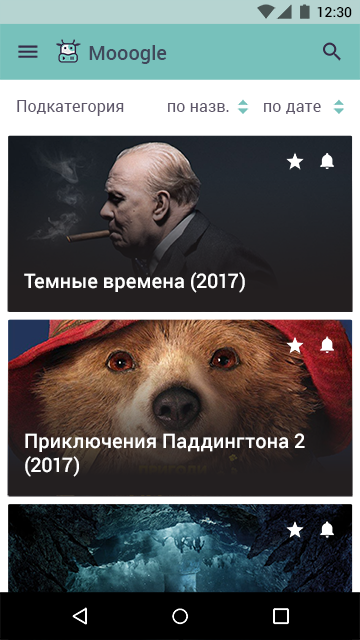
<style>
.page{position:relative;width:360px;height:640px}
.page>*{position:absolute;margin:0}
.t1{font:14px "Roboto-Medium";color:#000000}
.t2{font:20px "Roboto-Medium";letter-spacing:0.005em;color:#41485b}
.t3{font:16px "Roboto-Regular";letter-spacing:0.005em;color:#5e576a}
.t4{font:16px "Roboto-Regular";letter-spacing:0.01em;color:#5e576a}
.t5{font:20px "Roboto-Medium";color:#ffffff}
.t6{font:20px/24px "Roboto-Medium";color:#ffffff}
</style>
<div class="page">
<p class="t1" style="left:317px;top:7px;width:35px;height:11px">12:30</p>
<p class="t2" style="left:89px;top:45px;width:78px;height:19px">Mooogle</p>
<p class="t3" style="left:17px;top:100px;width:107px;height:16px">Подкатегория</p>
<p class="t4" style="left:168px;top:103px;width:61px;height:9px">по назв.</p>
<p class="t4" style="left:264px;top:103px;width:57px;height:11px">по дате</p>
<p class="t5" style="left:24px;top:272px;width:221px;height:21px">Темные времена (2017)</p>
<p class="t6" style="left:25px;top:433px;width:280px;height:44px">Приключения Паддингтона 2 (2017)</p>
</div>
